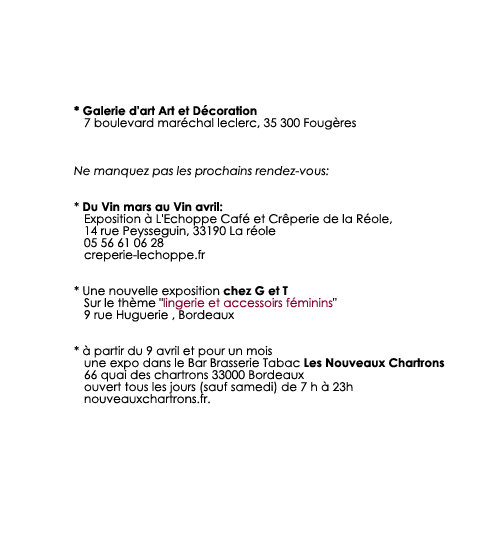
<style>
.page{position:relative;width:503px;height:547px;background:#ffffff}
.page>*{position:absolute;margin:0}
.t1{font:12px/12px "CenturyGothic";color:#000000}
.t2{font:12px/12px "CenturyGothic-Bold";color:#000000}
.t3{font:12px/12px "CenturyGothic-Italic";color:#000000}
.t4{font:12px/12px "CenturyGothic";color:#80012e}
</style>
<div class="page">
<p class="t1" style="left:74px;top:105px;width:371px;height:299px"><span class="t2">* Galerie d'art Art et Décoration <br></span>   7 boulevard maréchal leclerc, 35 300 Fougères<br><br><br><br><span class="t3">Ne manquez pas les prochains rendez-vous:<br><br><br></span>* <span class="t2">Du Vin mars au Vin avril:<br></span>   Exposition à L'Echoppe Café et Crêperie de la Réole, <br>   14 rue Peysseguin, 33190 La réole <br>   05 56 61 06 28 <br>   creperie-lechoppe.fr<br><br><br>* Une nouvelle exposition <span class="t2">chez G et T<br></span>   Sur le thème "<span class="t4">lingerie et accessoirs féminins</span>"<br>   9 rue Huguerie , Bordeaux<br><br><br>* à partir du 9 avril et pour un mois <br>   une expo dans le Bar Brasserie Tabac<span class="t2"> Les Nouveaux Chartrons <br></span>   66 quai des chartrons 33000 Bordeaux<br>   ouvert tous les jours (sauf samedi) de 7 h à 23h <br>   nouveauxchartrons.fr.</p>
</div>
